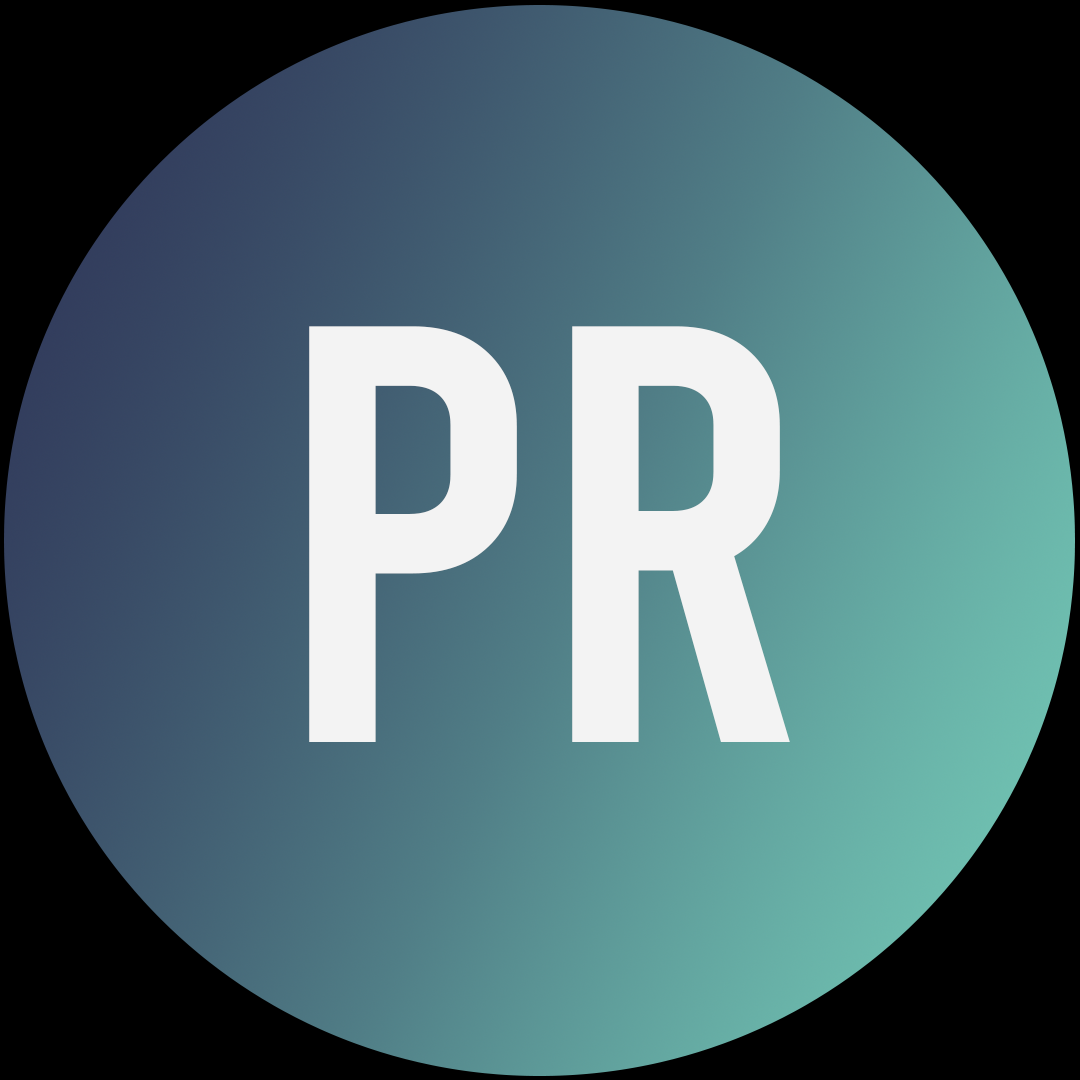
<style>
.page{position:relative;width:1080px;height:1080px;background:#000000}
.page>*{position:absolute;margin:0}
.t1{font:593.8px "Bebas-Regular";color:#f3f3f3;scale:1.05 1}
</style>
<div class="page">
<p class="t1" style="left:309px;top:326px;width:481px;height:416px">PR</p>
</div>
